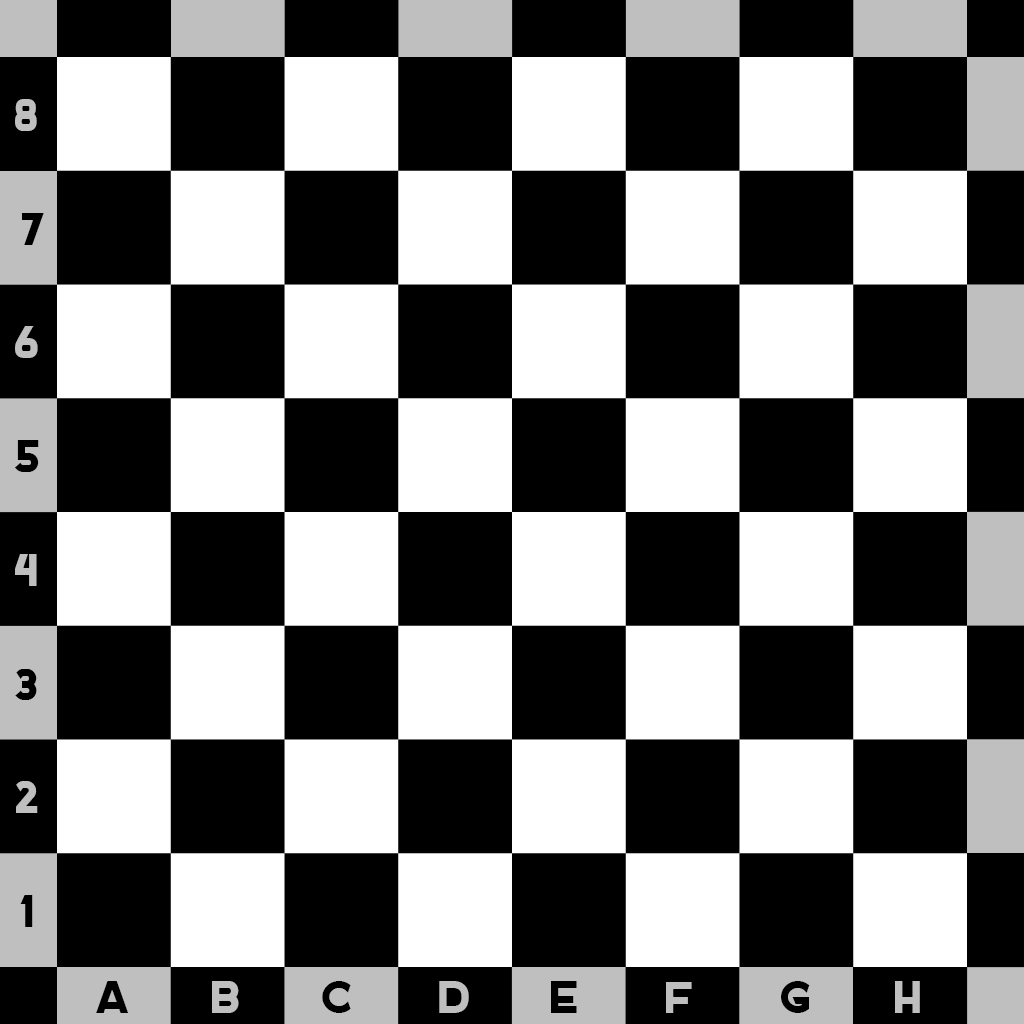
<style>
.page{position:relative;width:1024px;height:1024px;background:#000000}
.page>*{position:absolute;margin:0}
.t1{font:45.3px "DOCKERONE";color:#bfbfbf}
.t2{font:45.3px "DOCKERONE";color:#000000}
</style>
<div class="page">
<p class="t1" style="left:15px;top:99px;width:22px;height:32px">8</p>
<p class="t2" style="left:22px;top:213px;width:22px;height:32px">7</p>
<p class="t1" style="left:15px;top:326px;width:23px;height:32px">6</p>
<p class="t2" style="left:14px;top:440px;width:25px;height:32px">5</p>
<p class="t1" style="left:15px;top:554px;width:22px;height:32px">4</p>
<p class="t2" style="left:15px;top:669px;width:22px;height:31px">3</p>
<p class="t1" style="left:16px;top:781px;width:22px;height:32px">2</p>
<p class="t2" style="left:20px;top:895px;width:13px;height:32px">1</p>
<p class="t2" style="left:96px;top:981px;width:33px;height:32px">A</p>
<p class="t1" style="left:212px;top:981px;width:27px;height:32px">B</p>
<p class="t2" style="left:322px;top:981px;width:29px;height:32px">C</p>
<p class="t1" style="left:439px;top:981px;width:30px;height:32px">D</p>
<p class="t2" style="left:551px;top:981px;width:26px;height:32px">E</p>
<p class="t1" style="left:666px;top:982px;width:26px;height:31px">F</p>
<p class="t2" style="left:781px;top:981px;width:29px;height:32px">G</p>
<p class="t1" style="left:895px;top:981px;width:25px;height:32px">H</p>
</div>
